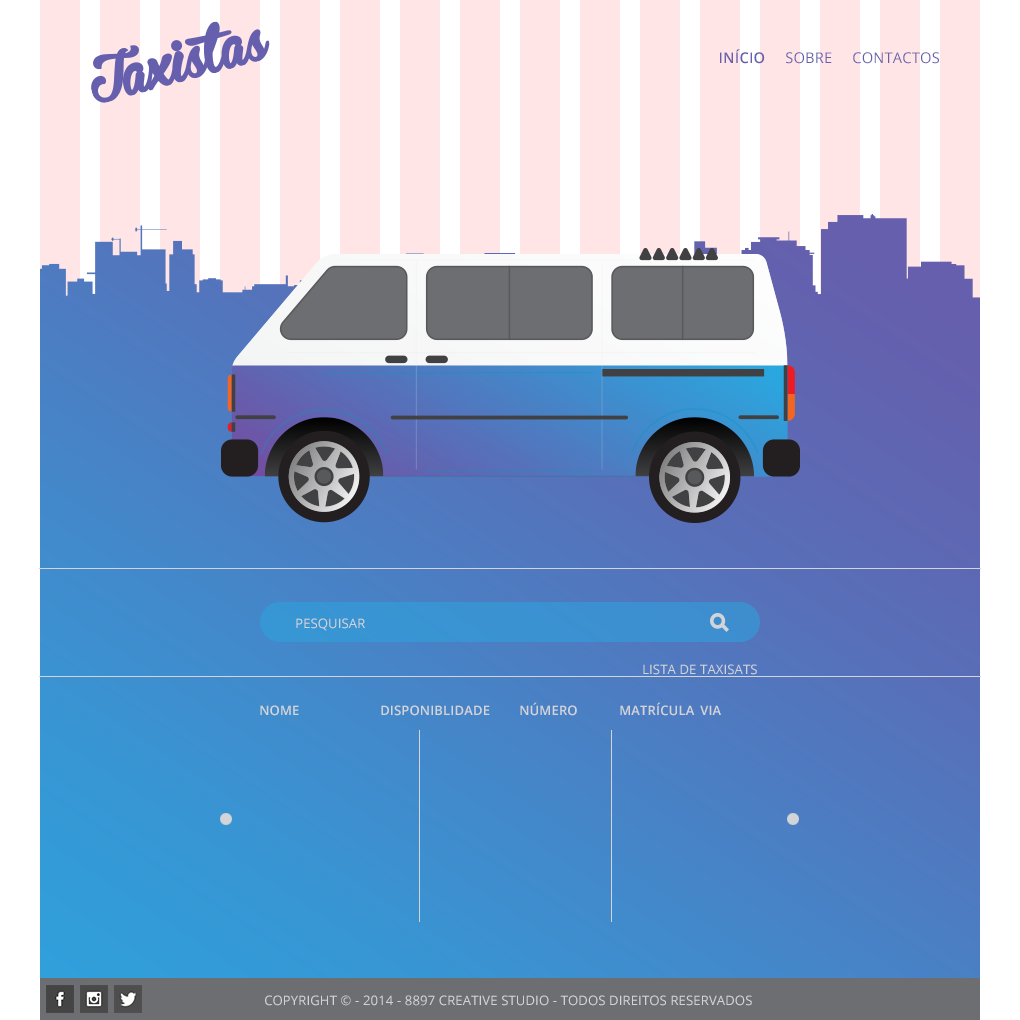
<style>
.page{position:relative;width:1020px;height:1020px}
.page>*{position:absolute;margin:0}
.t1{font:14.6px "OpenSans";letter-spacing:0.013em;color:#655fad;text-transform:uppercase}
.t2{font:14.6px "OpenSans-Semibold";letter-spacing:0.013em;color:#655fad;text-transform:uppercase}
.t3{font:13px "OpenSans";letter-spacing:0.013em;color:#d2d4d8;text-transform:uppercase}
.t4{font:13px "OpenSans-Semibold";letter-spacing:0.013em;color:#d2d4d8;text-transform:uppercase}
</style>
<div class="page">
<p class="t1" style="left:720px;top:49px;width:219px;height:15px"><span class="t2">início</span>     sobre     CoNTACTOS</p>
<p class="t3" style="left:296px;top:618px;width:69px;height:13px">Pesquisar</p>
<p class="t3" style="left:643px;top:664px;width:114px;height:11px">lista de taxisats</p>
<p class="t4" style="left:520px;top:702px;width:57px;height:14px">Número</p>
<p class="t4" style="left:620px;top:702px;width:75px;height:14px">Matrícula</p>
<p class="t4" style="left:260px;top:705px;width:39px;height:11px">NOME</p>
<p class="t4" style="left:381px;top:705px;width:109px;height:11px">Disponiblidade</p>
<p class="t4" style="left:700px;top:705px;width:21px;height:10px">VIA</p>
<p class="t3" style="left:265px;top:995px;width:487px;height:11px">Copyright © - 2014 - 8897 creative studio - Todos direitos reservados</p>
</div>
